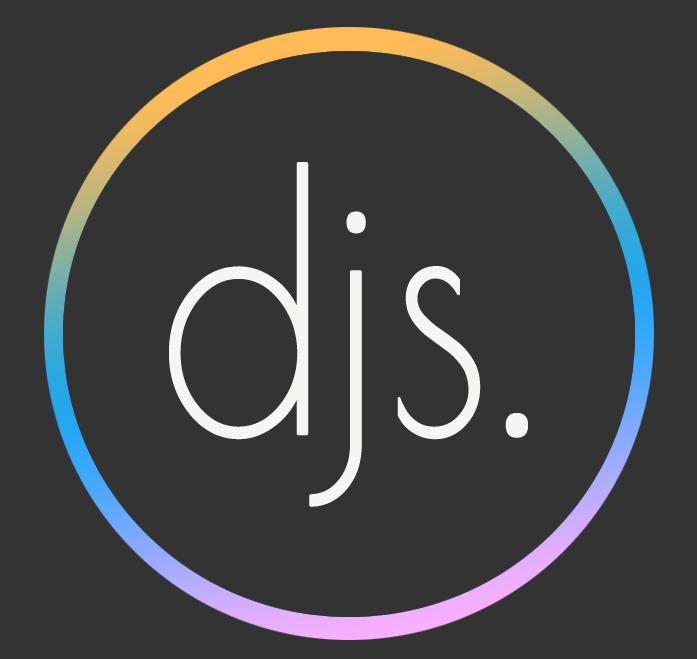
<style>
.page{position:relative;width:697px;height:659px;background:#333333}
.page>*{position:absolute;margin:0}
.t1{font:361.1px "PoiretOne-Regular";color:#f5f6f4;font-weight:bold;scale:0.8 1}
</style>
<div class="page">
<p class="t1" style="left:169px;top:162px;width:359px;height:345px">djs.</p>
</div>
